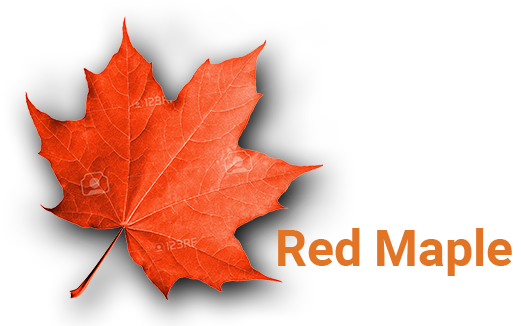
<style>
.page{position:relative;width:521px;height:326px;background:#ffffff}
.page>*{position:absolute;margin:0}
.t1{font:50px "Roboto-Bold";color:#e27426}
</style>
<div class="page">
<p class="t1" style="left:278px;top:228px;width:234px;height:48px">Red Maple</p>
</div>
